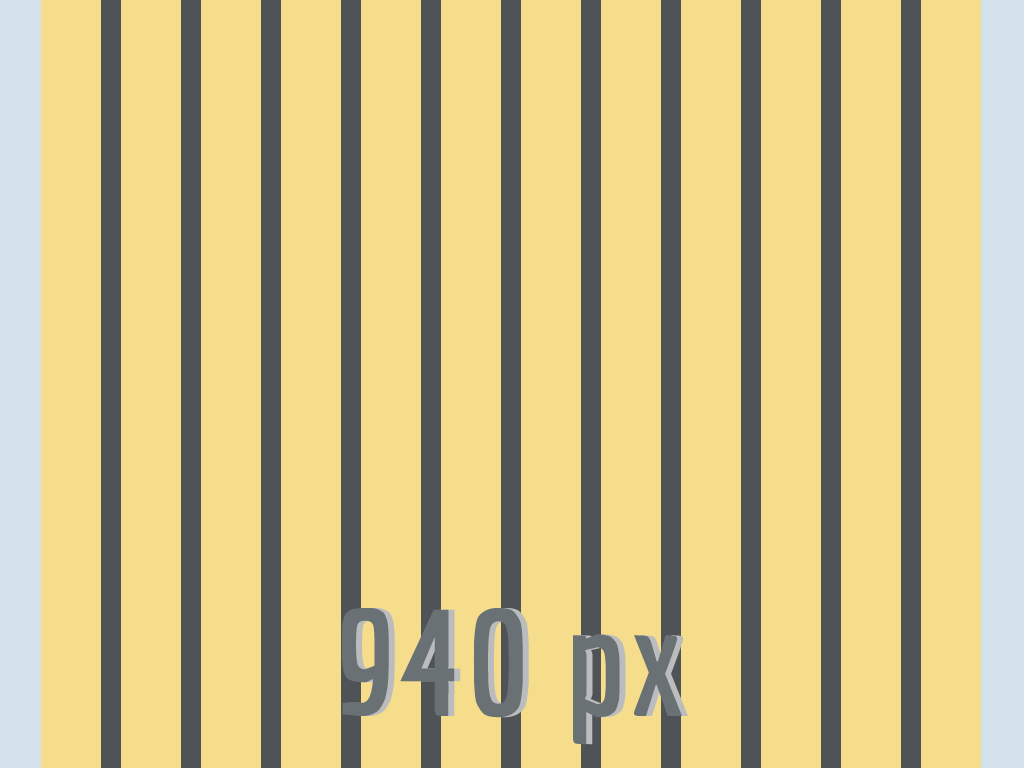
<style>
.page{position:relative;width:1024px;height:768px;background:#f5dd8c}
.page>*{position:absolute;margin:0}
.t1{font:150px "Economica-Bold";letter-spacing:0.03em;color:#6a7174}
.t2{font:150px "Economica-Bold";letter-spacing:0.03em}
</style>
<div class="page">
<p class="t1" style="left:341px;top:608px;width:341px;height:137px">940 px</p>
<p class="t2" style="left:347px;top:608px;width:341px;height:137px">940 px</p>
</div>
